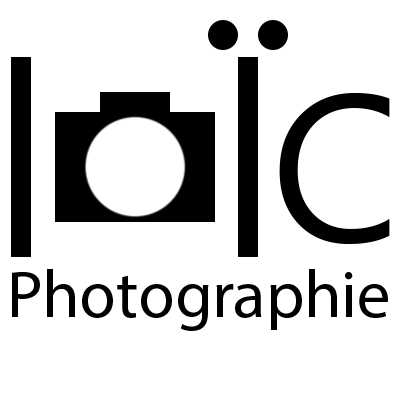
<style>
.page{position:relative;width:400px;height:400px;background:#ffffff}
.page>*{position:absolute;margin:0}
.t1{font:210px "MyanmarText";color:#000000}
.t2{font:67px "MyriadPro-Regular";color:#000000}
</style>
<div class="page">
<p class="t1" style="left:279px;top:93px;width:111px;height:151px">C</p>
<p class="t2" style="left:12px;top:269px;width:376px;height:62px">Photographie</p>
</div>
